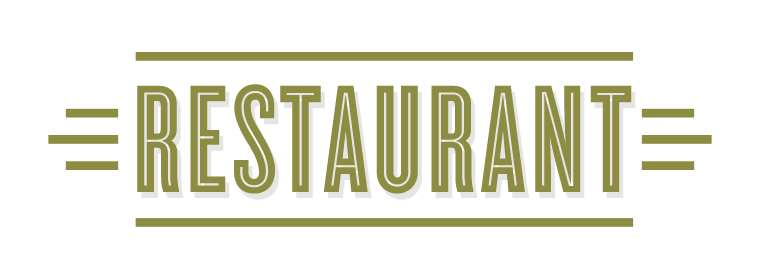
<style>
.page{position:relative;width:760px;height:280px;background:#ffffff}
.page>*{position:absolute;margin:0}
.t1{font:159px "Cyclone";letter-spacing:0.04em;color:#8c8d42;text-transform:uppercase}
</style>
<div class="page">
<p class="t1" style="left:137px;top:84px;width:495px;height:110px">Restaurant</p>
</div>
